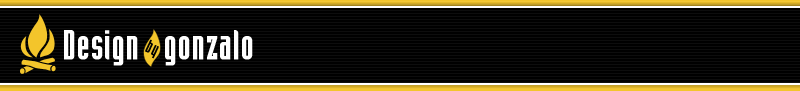
<style>
.page{position:relative;width:800px;height:91px;background:#000000}
.page>*{position:absolute;margin:0}
.t1{font:40px "Industria-Solid";letter-spacing:0.025em;color:#ffffff;font-weight:bold}
.t2{font:18px "Industria-Solid";letter-spacing:0.025em;color:#000000;font-weight:bold}
</style>
<div class="page">
<p class="t1" style="left:64px;top:30px;width:189px;height:36px">Design   gonzalo</p>
<p class="t2" style="left:144px;top:39px;width:15px;height:20px;rotate:25deg">by</p>
</div>
